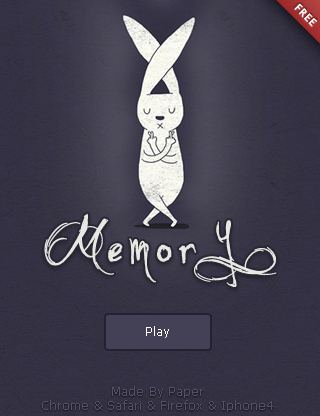
<style>
.page{position:relative;width:320px;height:416px}
.page>*{position:absolute;margin:0}
.t1{font:10px "LucidaSansUnicode";letter-spacing:0.075em;color:#ffffff;font-weight:bold}
.t2{font:72px "Dunno";letter-spacing:0.075em;color:#e8e8e3;font-weight:bold}
.t3{font:12px "Tahoma";letter-spacing:0.075em;color:#ffffff}
.t4{font:12px/2px "Tahoma";letter-spacing:0.075em;color:#555169}
</style>
<div class="page">
<p class="t1" style="left:294px;top:3px;width:23px;height:24px;rotate:45deg">FREE</p>
<p class="t2" style="left:44px;top:213px;width:152px;height:70px">Memor</p>
<p class="t2" style="left:194px;top:220px;width:83px;height:67px">y</p>
<p class="t3" style="left:146px;top:326px;width:23px;height:12px">Play</p>
<p class="t4" style="left:42px;top:386px;width:231px;height:26px;text-align:center">Made By Paper<br><br><br>Chrome &amp; Safari &amp; Firefox &amp; Iphone4</p>
</div>
